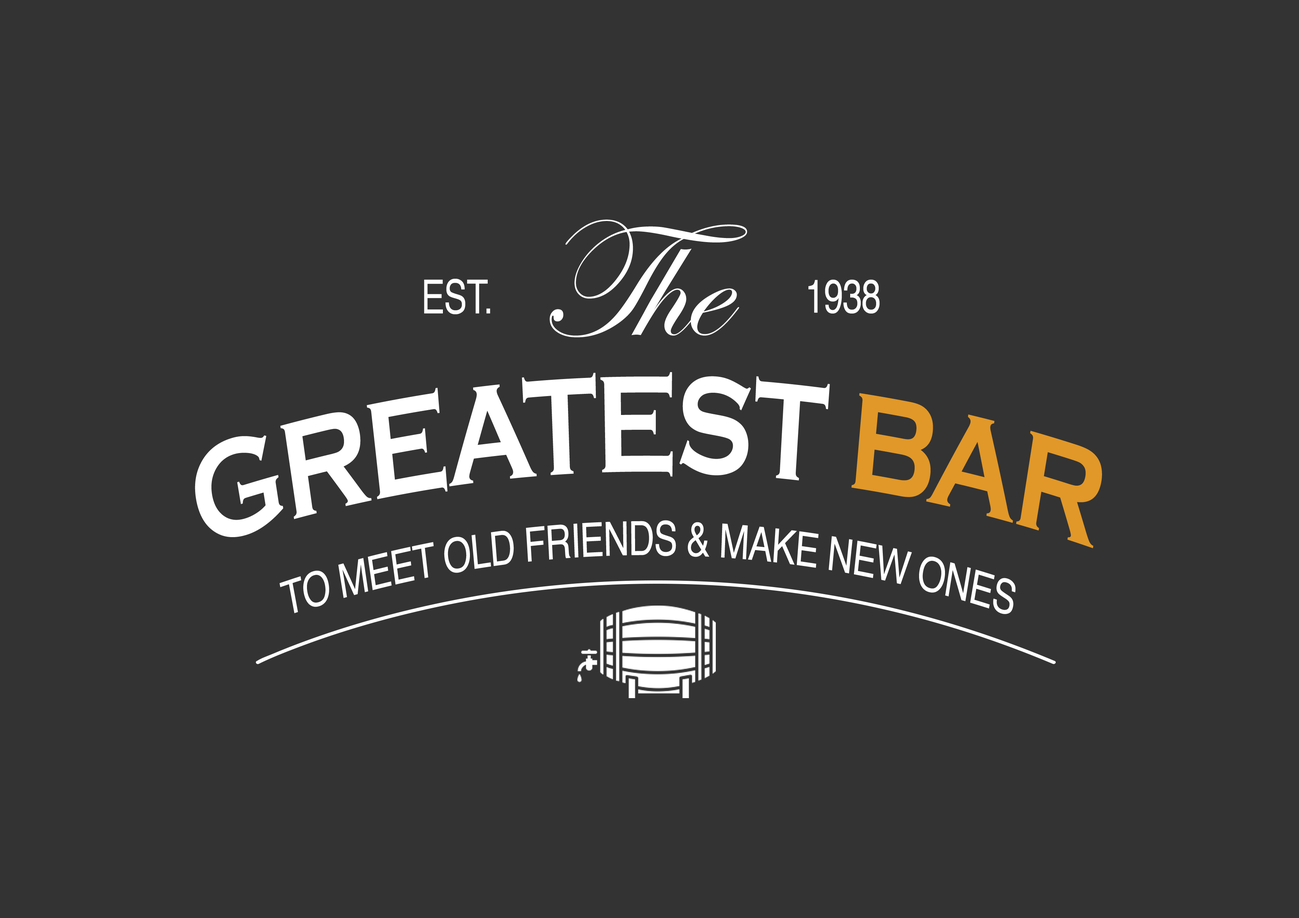
<style>
.page{position:relative;width:1299px;height:918px;background:#333333}
.page>*{position:absolute;margin:0}
.t1{font:170.1px "EdwardianScriptITC";letter-spacing:-0.024em;color:#ffffff}
.t2{font:47.1px "Helvetica";letter-spacing:-0.024em;color:#ffffff;scale:0.75 1}
.t3{font:142.4px "CopperplateGothic-Bold";letter-spacing:-0.024em;color:#ffffff;scale:0.74 1}
.t4{font:142.4px "CopperplateGothic-Bold";letter-spacing:-0.024em;color:#e19828;scale:0.74 1}
.t5{font:47.1px/115.2px "Helvetica";letter-spacing:-0.024em;color:#ffffff;scale:0.75 1}
</style>
<div class="page">
<p class="t1" style="left:549px;top:220px;width:198px;height:118px">The</p>
<p class="t2" style="left:424px;top:279px;width:66px;height:35px">EST.</p>
<p class="t2" style="left:808px;top:280px;width:72px;height:34px">1938</p>
<p class="t3" style="left:195px;top:372px;width:907px;height:176px">GREATEST <span class="t4">BAR</span></p>
<p class="t5" style="left:280px;top:520px;width:736px;height:94px;text-align:center">TO MEET OLD FRIENDS &amp; MAKE NEW ONES</p>
</div>
